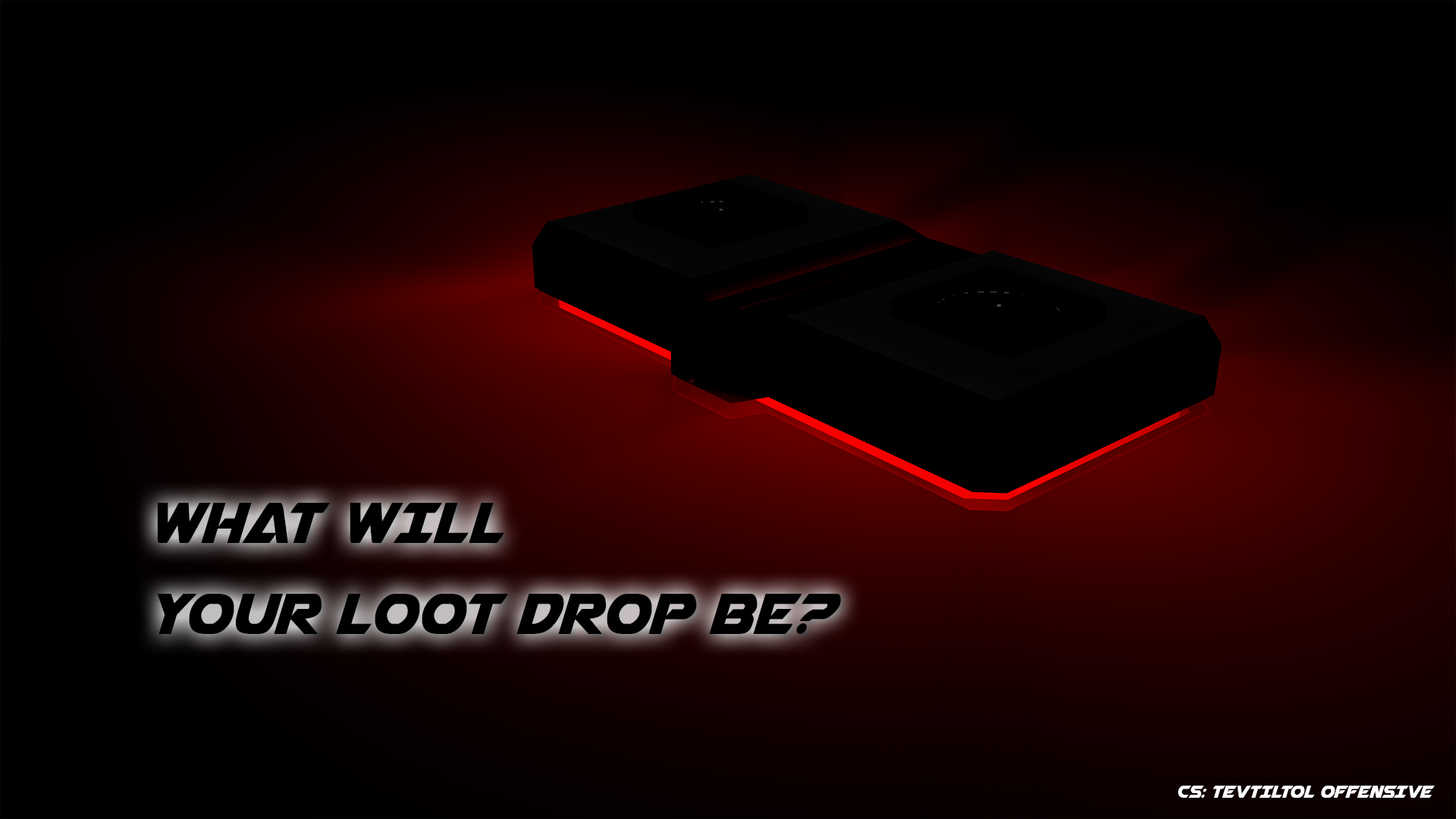
<style>
.page{position:relative;width:1456px;height:819px;background:#000000}
.page>*{position:absolute;margin:0}
.t1{font:75.8px "Airstrike";color:#000000;scale:0.84 1}
.t2{font:22.7px "Airstrike";color:#ffffff;scale:0.84 1}
</style>
<div class="page">
<p class="t1" style="left:157px;top:503px;width:684px;height:131px">What WIll <br>your loot drop be?</p>
<p class="t2" style="left:1178px;top:786px;width:257px;height:12px">CS: TevtIltol offensIve</p>
</div>
